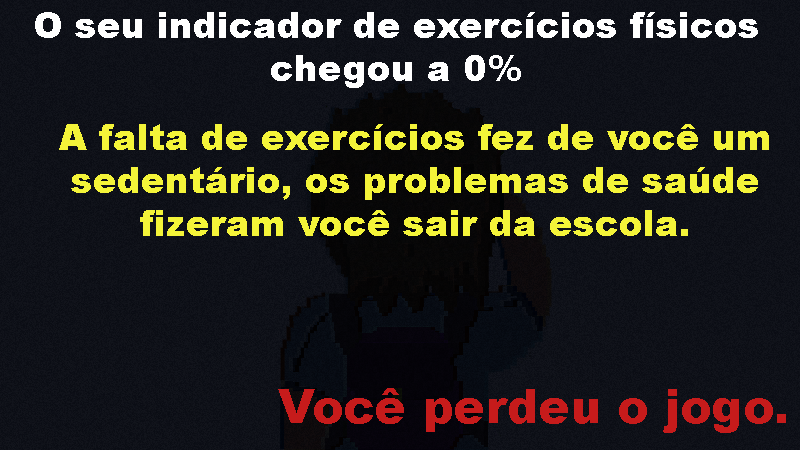
<style>
.page{position:relative;width:800px;height:450px}
.page>*{position:absolute;margin:0}
.t1{font:36px "Arial-Black";color:#ffffff}
.t2{font:36px "Arial-Black";color:#f4f439}
.t3{font:36px/80px "Arial-Black";color:#f4f439}
.t4{font:47.2px "Arial-Black";color:#c61b1b}
</style>
<div class="page">
<p class="t1" style="left:35px;top:12px;width:723px;height:76px;text-align:center">O seu indicador de exercícios físicos chegou a 0%</p>
<p class="t2" style="left:59px;top:124px;width:710px;height:112px;text-align:center"><span class="t3">A falta de exercícios </span>fez de você um sedentário, os problemas de saúde fizeram você sair da escola.</p>
<p class="t4" style="left:278px;top:388px;width:508px;height:45px">Você perdeu o jogo.</p>
</div>
